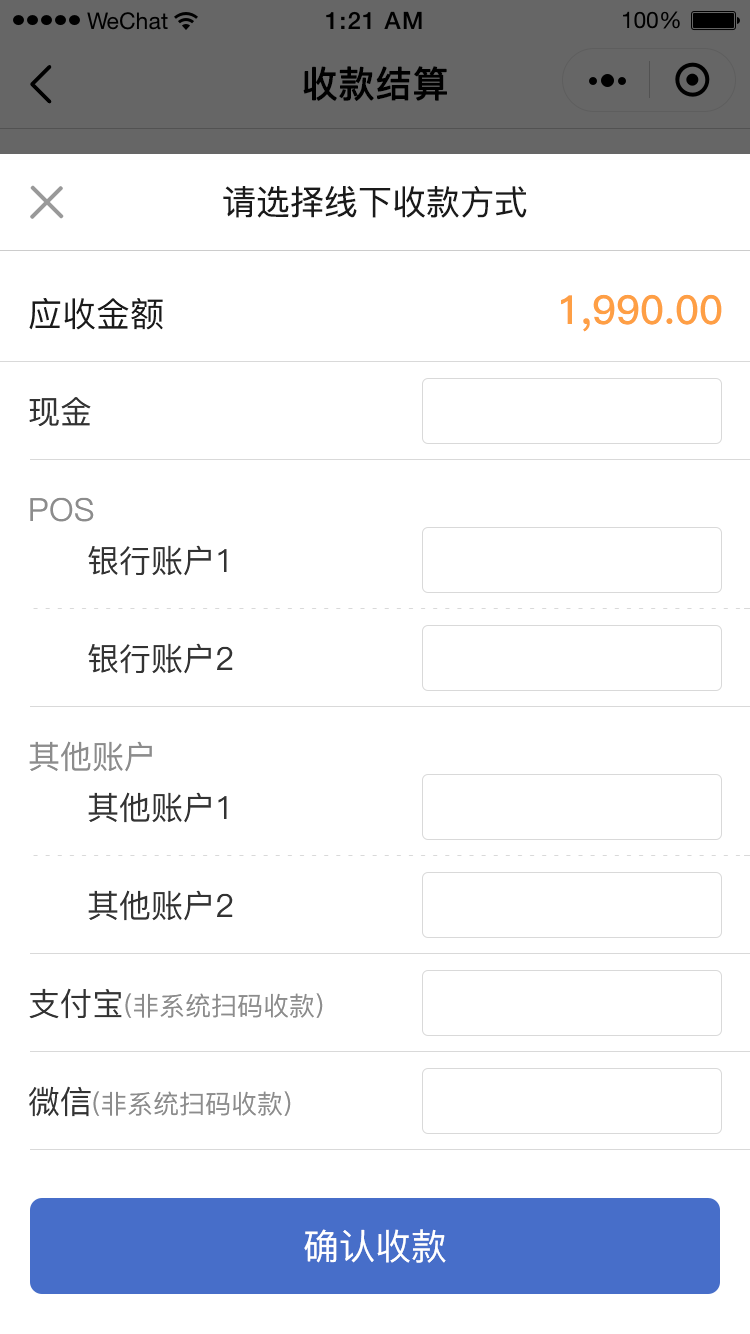
<style>
.page{position:relative;width:750px;height:1334px;background:#ffffff}
.page>*{position:absolute;margin:0}
.t1{font:36px "PingFang-SC-Medium";color:#000000;font-weight:bold}
.t2{font:34px "PingFang-SC-Medium";color:#1a1a1a}
.t3{font:40px "PingFang-SC-Bold";color:#fe9f45}
.t4{font:32px "PingFang-SC-Medium";color:#333333}
.t5{font:32px "PingFang-SC-Medium";color:#8c8c8c}
.t6{font:26px "PingFang-SC-Medium";color:#8c8c8c}
.t7{font:36px "PingFang-SC-Medium";color:#ffffff}
</style>
<div class="page">
<p class="t1" style="left:303px;top:66px;width:144px;height:35px">收款结算</p>
<p class="t2" style="left:223px;top:186px;width:304px;height:32px">请选择线下收款方式</p>
<p class="t3" style="left:561px;top:294px;width:161px;height:38px">1,990.00</p>
<p class="t2" style="left:29px;top:298px;width:134px;height:32px">应收金额</p>
<p class="t4" style="left:29px;top:397px;width:62px;height:30px">现金</p>
<p class="t5" style="left:30px;top:497px;width:64px;height:25px">POS</p>
<p class="t4" style="left:88px;top:545px;width:139px;height:31px">银行账户1</p>
<p class="t4" style="left:88px;top:643px;width:145px;height:31px">银行账户2</p>
<p class="t5" style="left:29px;top:741px;width:123px;height:31px">其他账户</p>
<p class="t4" style="left:88px;top:792px;width:139px;height:31px">其他账户1</p>
<p class="t4" style="left:88px;top:890px;width:145px;height:31px">其他账户2</p>
<p class="t6" style="left:29px;top:988px;width:294px;height:31px"><span class="t4">支付宝</span>(非系统扫码收款)</p>
<p class="t6" style="left:29px;top:1086px;width:262px;height:31px"><span class="t4">微信</span>(非系统扫码收款)</p>
<p class="t7" style="left:304px;top:1229px;width:142px;height:34px">确认收款</p>
</div>
